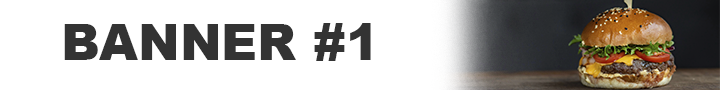
<style>
.page{position:relative;width:720px;height:90px;background:#ffffff}
.page>*{position:absolute;margin:0}
.t1{font:50px "Arial-Black";color:#333333}
</style>
<div class="page">
<p class="t1" style="left:64px;top:23px;width:307px;height:38px">BANNER #1</p>
</div>
